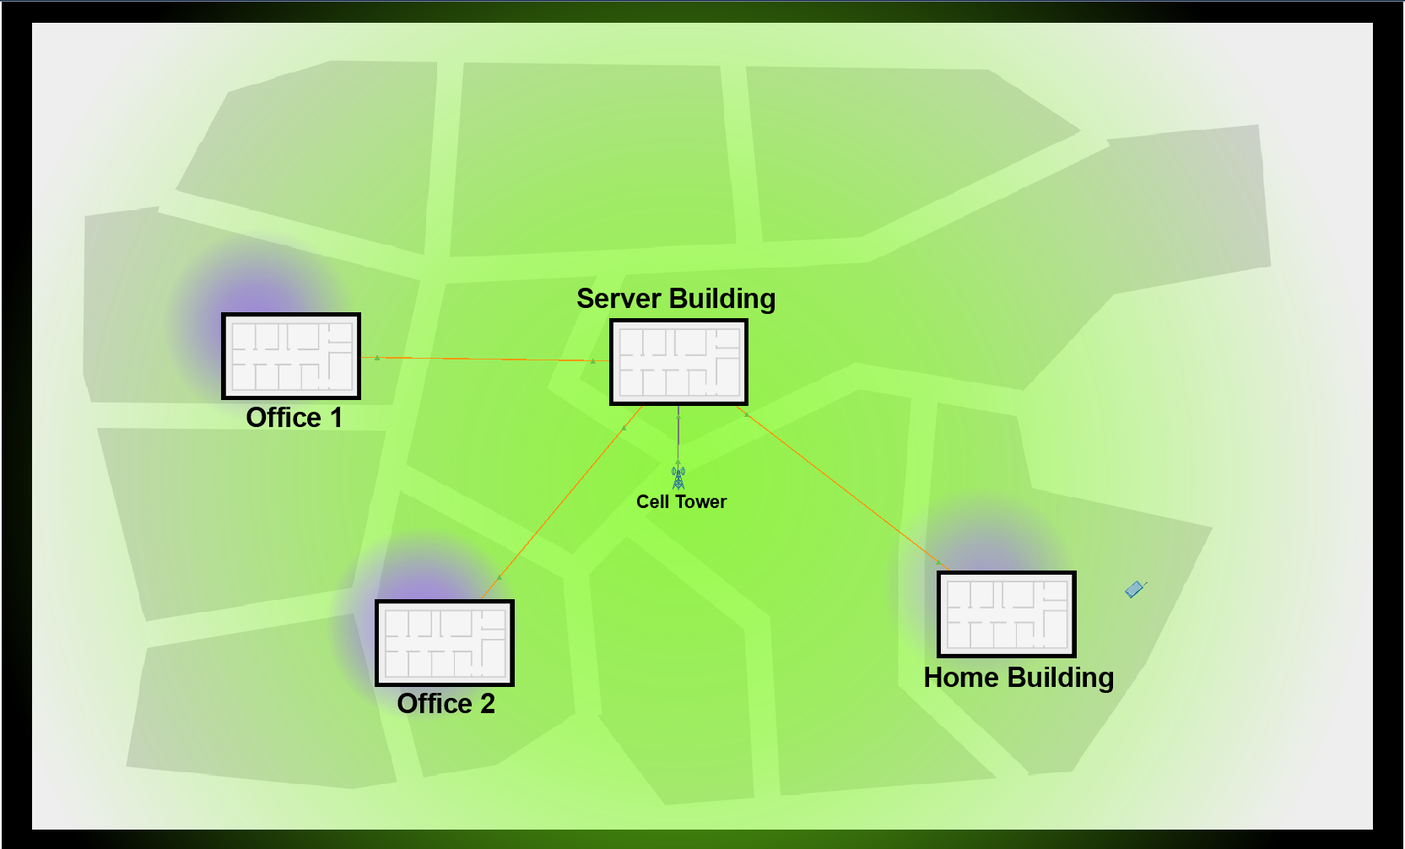
<style>
.page{position:relative;width:1405px;height:849px}
.page>*{position:absolute;margin:0}
.t1{font:28.2px "Arial-BoldMT";letter-spacing:-0.02em;color:#010101}
.t2{font:18.9px "Arial-BoldMT";letter-spacing:-0.02em;color:#010101}
</style>
<div class="page">
<p class="t1" style="left:577px;top:288px;width:198px;height:26px">Server Building</p>
<p class="t1" style="left:246px;top:407px;width:94px;height:20px">Office 1</p>
<p class="t2" style="left:637px;top:494px;width:90px;height:14px">Cell Tower</p>
<p class="t1" style="left:925px;top:667px;width:188px;height:26px">Home Building</p>
<p class="t1" style="left:397px;top:693px;width:97px;height:20px">Office 2</p>
</div>
